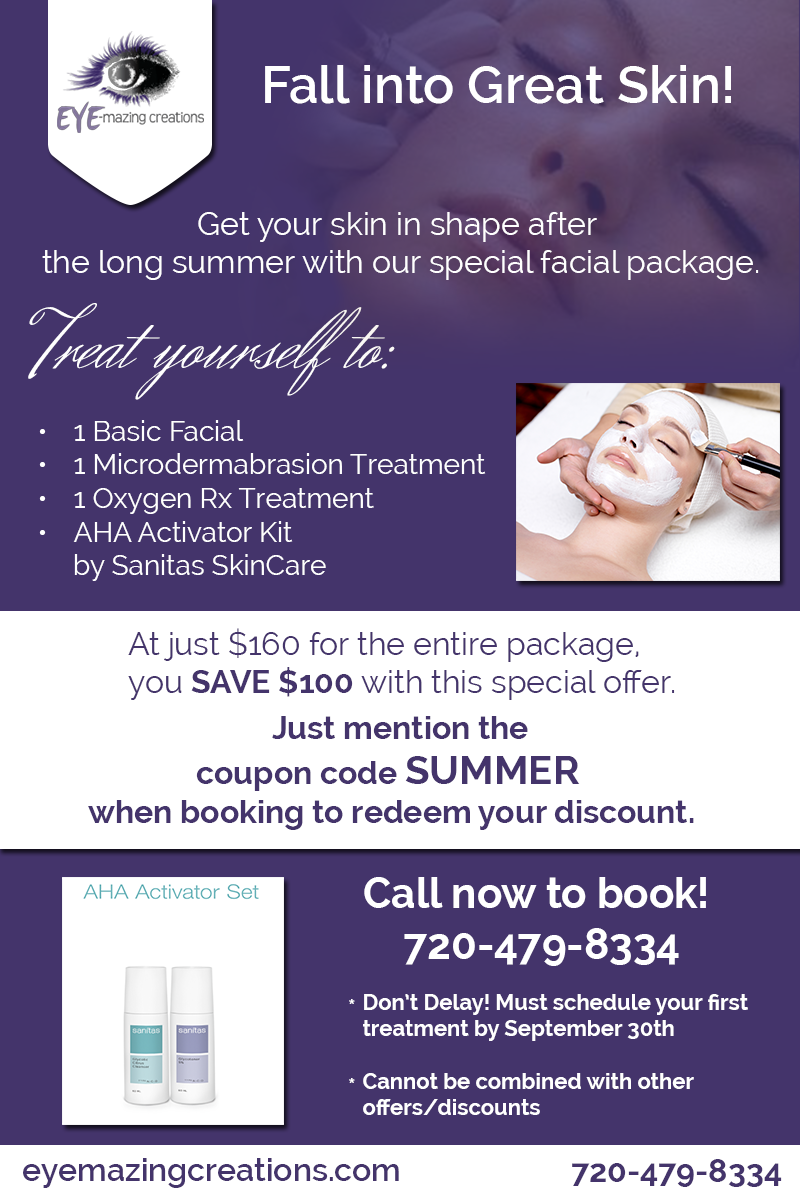
<style>
.page{position:relative;width:800px;height:1200px;background:#44346b}
.page>*{position:absolute;margin:0}
.t1{font:52.3px "Raleway-SemiBold";color:#ffffff}
.t2{font:32px "Raleway";color:#ffffff}
.t3{font:86px "HerrVonMuellerhoff-Regular";color:#ffffff}
.t4{font:28px "Raleway";color:#ffffff}
.t5{font:32px "Raleway";color:#44346b}
.t6{font:32px "Raleway-Bold";color:#44346b}
.t7{font:40px "Raleway-Bold";color:#44346b}
.t8{font:42px "Raleway-Bold";color:#ffffff}
.t9{font:22px "Raleway-Bold";color:#ffffff}
.t10{font:32px "Raleway-SemiBold";color:#44346b}
</style>
<div class="page">
<p class="t1" style="left:265px;top:65px;width:466px;height:39px">Fall into Great Skin!</p>
<p class="t2" style="left:42px;top:212px;width:717px;height:68px;text-align:center">Get your skin in shape after <br>the long summer with our special facial package.</p>
<p class="t3" style="left:28px;top:303px;width:367px;height:97px">Treat yourself to:</p>
<p class="t4" style="left:39px;top:420px;width:447px;height:161px">• 1 Basic Facial<br>• 1 Microdermabrasion Treatment<br>• 1 Oxygen Rx Treatment<br>• AHA Activator Kit <br>     by Sanitas SkinCare</p>
<p class="t5" style="left:128px;top:628px;width:547px;height:72px">At just $160 for the entire package, <br>you <span class="t6">SAVE $100</span> with this special offer.</p>
<p class="t6" style="left:272px;top:716px;width:256px;height:23px">Just mention the</p>
<p class="t6" style="left:88px;top:756px;width:606px;height:74px;text-align:center">coupon code <span class="t7">SUMMER<br></span> when booking to redeem your discount.</p>
<p class="t8" style="left:364px;top:877px;width:342px;height:89px;text-align:center">Call now to book! <br>720-479-8334</p>
<p class="t9" style="left:349px;top:999px;width:6px;height:5px">*</p>
<p class="t9" style="left:363px;top:994px;width:385px;height:121px">Don’t Delay! Must schedule your first <br>treatment by September 30th <br><br>Cannot be combined with other <br>offers/discounts</p>
<p class="t9" style="left:349px;top:1078px;width:6px;height:5px">*</p>
<p class="t10" style="left:23px;top:1158px;width:376px;height:30px">eyemazingcreations.com</p>
<p class="t6" style="left:572px;top:1159px;width:210px;height:28px">720-479-8334</p>
</div>
